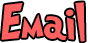
<style>
.page{position:relative;width:88px;height:43px;background:#ff6161}
.page>*{position:absolute;margin:0}
.t1{font:45.3px "Grinched";color:#ff6161;scale:1.05 1}
</style>
<div class="page">
<p class="t1" style="left:1px;top:2px;width:84px;height:40px">Email</p>
</div>
